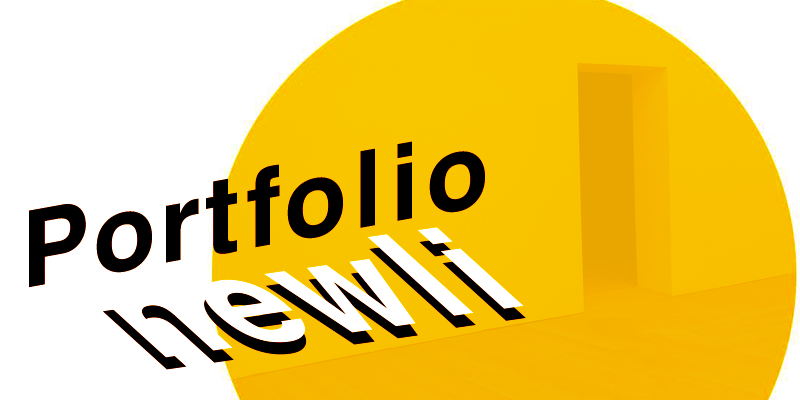
<style>
.page{position:relative;width:800px;height:400px;background:#ffffff}
.page>*{position:absolute;margin:0}
.t1{font:100px "H2gtrE";color:#000000}
.t2{font:152.9px "H2gtrE";color:#ffffff;scale:0.88 1}
.t3{font:152.9px "H2gtrE";scale:0.88 1}
</style>
<div class="page">
<p class="t1" style="left:29px;top:141px;width:456px;height:147px;rotate:-10deg">Portfolio</p>
<p class="t2" style="left:102px;top:227px;width:422px;height:131px;rotate:-8deg">newli</p>
<p class="t3" style="left:103px;top:239px;width:423px;height:131px;rotate:-8deg">newli</p>
</div>
